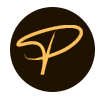
<style>
.page{position:relative;width:100px;height:100px;background:#1f1300}
.page>*{position:absolute;margin:0}
.t1{font:20.8px "Rockybilly";color:#ffc15e}
</style>
<div class="page">
<p class="t1" style="left:16px;top:25px;width:67px;height:50px">P</p>
</div>
